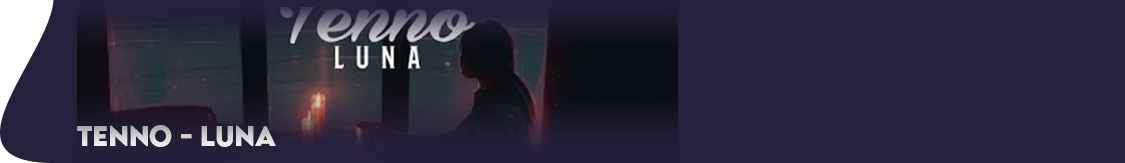
<style>
.page{position:relative;width:1125px;height:163px;background:#26203c}
.page>*{position:absolute;margin:0}
.t1{font:25px "LEMONMILK-Bold"}
</style>
<div class="page">
<p class="t1" style="left:77px;top:125px;width:199px;height:22px">Tenno - Luna</p>
</div>
